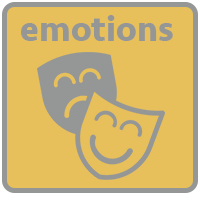
<style>
.page{position:relative;width:200px;height:200px;background:#e7bf5b}
.page>*{position:absolute;margin:0}
.t1{font:36px "Seravek-Bold";color:#959797}
</style>
<div class="page">
<p class="t1" style="left:21px;top:15px;width:152px;height:26px">emotions</p>
</div>
